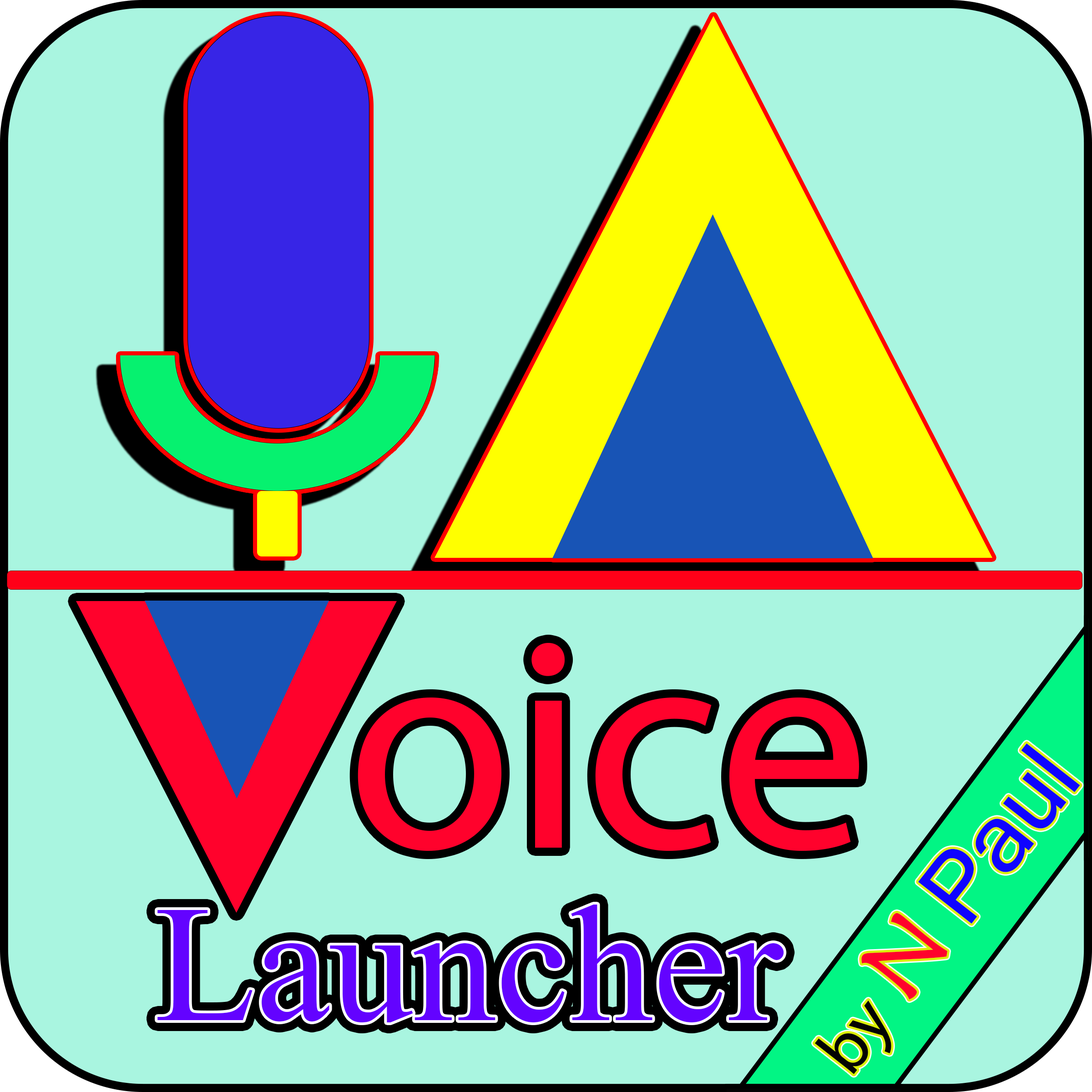
<style>
.page{position:relative;width:1092px;height:1092px;background:#a9f5e0}
.page>*{position:absolute;margin:0}
.t1{font:303.3px "MyriadPro-Regular";color:#ff022c}
.t2{font:94.6px "MicrosoftSansSerif";color:#0f03ff}
.t3{font:70px "MyriadPro-Regular";color:#030303}
.t4{font:94.6px "MaiandraGD-Regular";color:#ff022c}
.t5{font:248.4px "MicrosoftHimalaya";color:#6303ff}
</style>
<div class="page">
<p class="t1" style="left:358px;top:642px;width:501px;height:209px">oice</p>
<p class="t2" style="left:814px;top:743px;width:266px;height:331px;rotate:-52deg"><span class="t3">by </span><span class="t4">N </span>Paul</p>
<p class="t5" style="left:157px;top:905px;width:627px;height:117px">Launcher</p>
</div>
